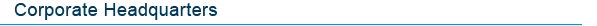
<style>
.page{position:relative;width:597px;height:26px;background:#ffffff}
.page>*{position:absolute;margin:0}
.t1{font:18px "ArialMT";letter-spacing:0.025em;color:#003a5a}
</style>
<div class="page">
<p class="t1" style="left:14px;top:3px;width:203px;height:17px">Corporate Headquarters</p>
</div>
